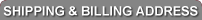
<style>
.page{position:relative;width:202px;height:20px;background:#858585}
.page>*{position:absolute;margin:0}
.t1{font:12.8px "Arial-BoldMT";color:#ffffff}
</style>
<div class="page">
<p class="t1" style="left:3px;top:6px;width:195px;height:10px">SHIPPING &amp; BILLING ADDRESS</p>
</div>
